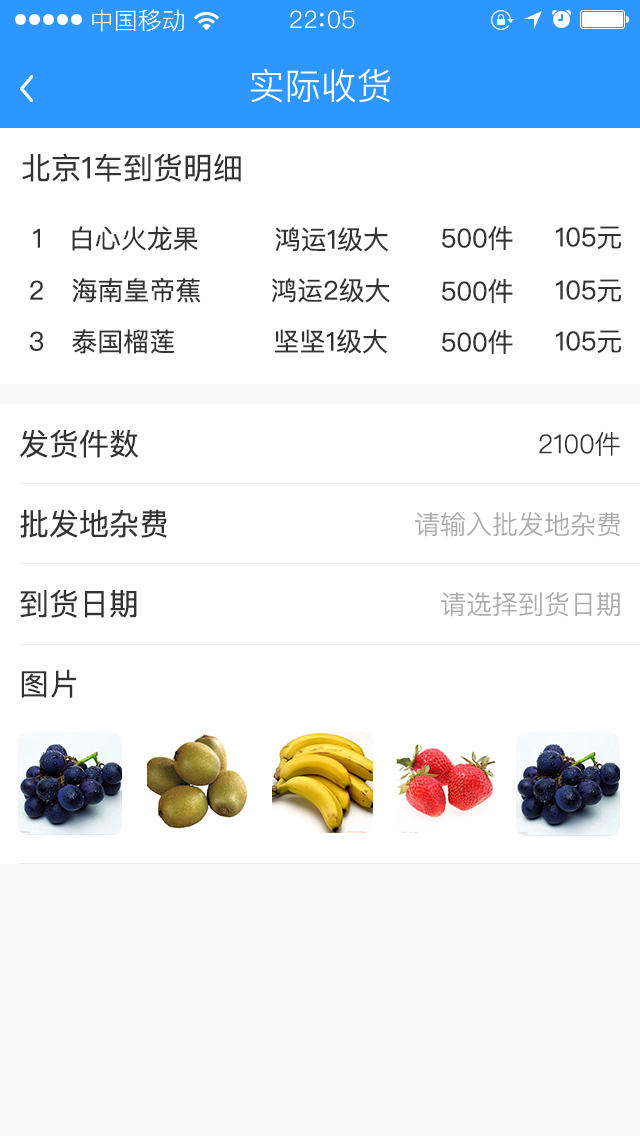
<style>
.page{position:relative;width:640px;height:1136px;background:#ffffff}
.page>*{position:absolute;margin:0}
.t1{font:24px "PingFang-SC-Regular";color:#ffffff}
.t2{font:36px "PingFang-SC-Regular";color:#ffffff}
.t3{font:30px "PingFangSC-Regular";color:#333333}
.t4{font:26px "PingFangSC-Regular";color:#333333}
.t5{font:26px "PingFangSC-Light";color:#333333}
.t6{font:26px "PingFangSC-Light";color:#aaaaaa}
</style>
<div class="page">
<p class="t1" style="left:92px;top:9px;width:92px;height:23px">中国移动</p>
<p class="t2" style="left:250px;top:68px;width:140px;height:35px">实际收货</p>
<p class="t3" style="left:22px;top:153px;width:219px;height:29px">北京1车到货明细</p>
<p class="t4" style="left:33px;top:228px;width:7px;height:20px">1</p>
<p class="t4" style="left:72px;top:226px;width:126px;height:25px">白心火龙果</p>
<p class="t4" style="left:275px;top:227px;width:113px;height:25px">鸿运1级大</p>
<p class="t4" style="left:442px;top:225px;width:71px;height:26px">500件</p>
<p class="t4" style="left:556px;top:226px;width:65px;height:23px">105元</p>
<p class="t4" style="left:30px;top:280px;width:13px;height:20px">2</p>
<p class="t4" style="left:72px;top:278px;width:129px;height:25px">海南皇帝蕉</p>
<p class="t4" style="left:272px;top:278px;width:118px;height:25px">鸿运2级大</p>
<p class="t4" style="left:442px;top:278px;width:71px;height:26px">500件</p>
<p class="t4" style="left:556px;top:279px;width:65px;height:23px">105元</p>
<p class="t4" style="left:72px;top:329px;width:103px;height:25px">泰国榴莲</p>
<p class="t4" style="left:275px;top:329px;width:112px;height:25px">坚坚1级大</p>
<p class="t4" style="left:442px;top:329px;width:71px;height:25px">500件</p>
<p class="t4" style="left:29px;top:331px;width:14px;height:20px">3</p>
<p class="t4" style="left:556px;top:330px;width:65px;height:23px">105元</p>
<p class="t3" style="left:20px;top:429px;width:118px;height:29px">发货件数</p>
<p class="t5" style="left:539px;top:431px;width:81px;height:25px">2100件</p>
<p class="t3" style="left:20px;top:509px;width:147px;height:29px">批发地杂费</p>
<p class="t6" style="left:415px;top:512px;width:205px;height:25px">请输入批发地杂费</p>
<p class="t3" style="left:20px;top:589px;width:117px;height:29px">到货日期</p>
<p class="t6" style="left:441px;top:592px;width:179px;height:25px">请选择到货日期</p>
<p class="t3" style="left:21px;top:669px;width:55px;height:29px">图片</p>
</div>
